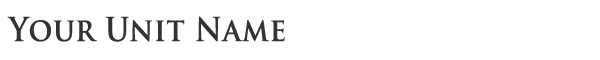
<style>
.page{position:relative;width:600px;height:60px;background:#ffffff}
.page>*{position:absolute;margin:0}
.t1{font:32px "TrajanPro-Bold";letter-spacing:0.025em;color:#333333;scale:0.9 1}
</style>
<div class="page">
<p class="t1" style="left:7px;top:16px;width:278px;height:26px">Your Unit Name</p>
</div>
